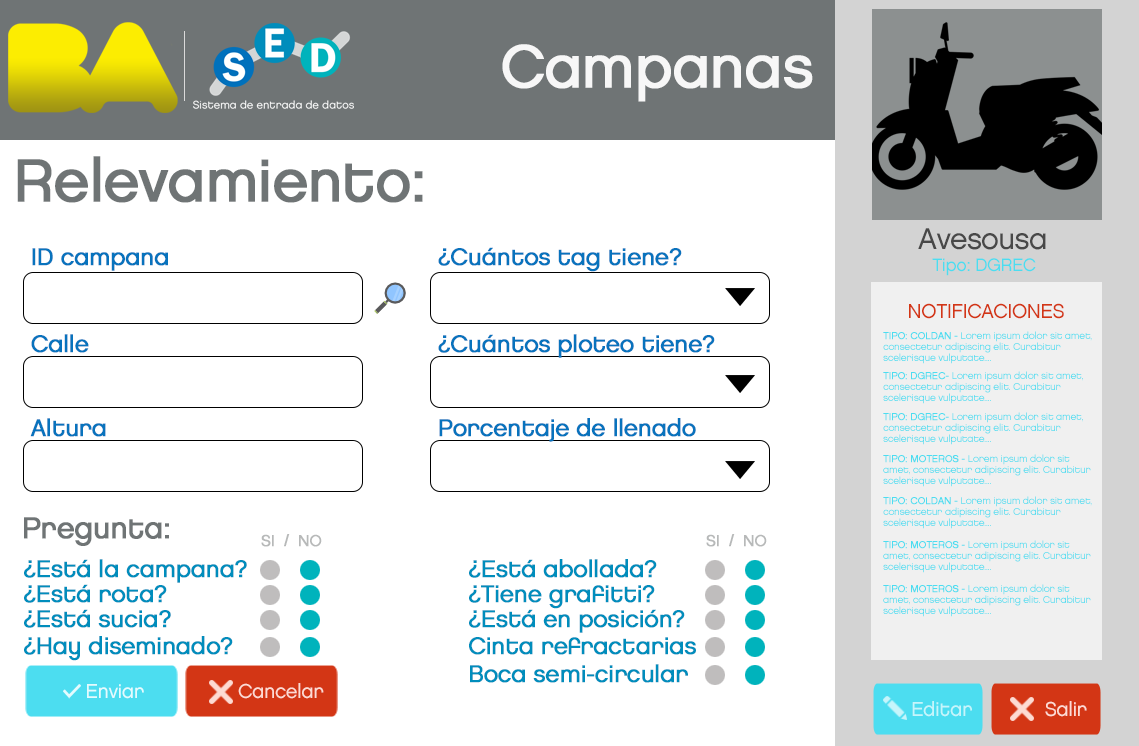
<style>
.page{position:relative;width:1139px;height:746px;background:#ffffff}
.page>*{position:absolute;margin:0}
.t1{font:60px "Chalet-LondonNineteenEighty";letter-spacing:-0.025em;color:#f7f7f7;font-weight:bold}
.t2{font:60px "Chalet-LondonNineteenEighty";letter-spacing:-0.025em;color:#6f7475;font-weight:bold}
.t3{font:30px "Chalet-LondonNineteenEighty";letter-spacing:-0.025em;color:#484848}
.t4{font:24px "Chalet-LondonNineteenEighty";letter-spacing:-0.025em;color:#0873bd;font-weight:bold}
.t5{font:18px "Chalet-LondonNineteenEighty";letter-spacing:-0.025em;color:#4cddf0}
.t6{font:20px "Chalet-LondonNineteenEighty";letter-spacing:-0.025em;color:#d33615}
.t7{font:10px/11px "Chalet-LondonNineteenEighty";letter-spacing:-0.025em;color:#4cddf0}
.t8{font:10px/11px "Chalet-LondonNineteenEighty";letter-spacing:-0.025em;color:#4cddf0;font-weight:bold}
.t9{font:30px "Chalet-LondonNineteenEighty";letter-spacing:-0.025em;color:#6f7475;font-weight:bold}
.t10{font:16px "Chalet-LondonNineteenEighty";letter-spacing:-0.025em;color:#b7b9b9;font-weight:bold}
.t11{font:24px "Chalet-LondonNineteenEighty";letter-spacing:-0.025em;color:#008dbc;font-weight:bold}
.t12{font:20px "Chalet-LondonNineteenEighty";letter-spacing:-0.025em;color:#e4fbfe}
.t13{font:20px "Chalet-LondonNineteenEighty";letter-spacing:-0.025em;color:#fddbd3}
.t14{font:20px "Chalet-LondonNineteenEighty";letter-spacing:-0.025em;color:#c6f5fb}
</style>
<div class="page">
<p class="t1" style="left:502px;top:44px;width:311px;height:58px">Campanas</p>
<p class="t2" style="left:17px;top:156px;width:406px;height:47px">Relevamiento:</p>
<p class="t3" style="left:918px;top:228px;width:128px;height:22px">Avesousa</p>
<p class="t4" style="left:32px;top:248px;width:136px;height:23px">ID campana</p>
<p class="t4" style="left:438px;top:247px;width:244px;height:25px">¿Cuántos tag tiene?</p>
<p class="t5" style="left:932px;top:258px;width:104px;height:18px">Tipo: DGREC</p>
<p class="t6" style="left:909px;top:303px;width:155px;height:16px">NOTIFICACIONES</p>
<p class="t4" style="left:31px;top:334px;width:58px;height:19px">Calle</p>
<p class="t4" style="left:438px;top:334px;width:277px;height:24px">¿Cuántos ploteo tiene?</p>
<p class="t7" style="left:883px;top:331px;width:209px;height:33px"><span class="t8">TIPO: COLDAN - </span>Lorem ipsum dolor sit amet, consectetur adipiscing elit. Curabitur scelerisque vulputate....</p>
<p class="t7" style="left:883px;top:371px;width:200px;height:33px"><span class="t8">TIPO: DGREC- </span>Lorem ipsum dolor sit amet, consectetur adipiscing elit. Curabitur scelerisque vulputate....</p>
<p class="t7" style="left:883px;top:412px;width:200px;height:33px"><span class="t8">TIPO: DGREC- </span>Lorem ipsum dolor sit amet, consectetur adipiscing elit. Curabitur scelerisque vulputate....</p>
<p class="t4" style="left:30px;top:418px;width:76px;height:19px">Altura</p>
<p class="t4" style="left:439px;top:418px;width:257px;height:24px">Porcentaje de llenado</p>
<p class="t7" style="left:883px;top:454px;width:208px;height:33px"><span class="t8">TIPO: MOTEROS - </span>Lorem ipsum dolor sit amet, consectetur adipiscing elit. Curabitur scelerisque vulputate....</p>
<p class="t7" style="left:883px;top:496px;width:209px;height:33px"><span class="t8">TIPO: COLDAN - </span>Lorem ipsum dolor sit amet, consectetur adipiscing elit. Curabitur scelerisque vulputate....</p>
<p class="t9" style="left:24px;top:517px;width:145px;height:29px">Pregunta:</p>
<p class="t10" style="left:261px;top:534px;width:61px;height:13px">SI  /  NO</p>
<p class="t10" style="left:706px;top:534px;width:61px;height:13px">SI  /  NO</p>
<p class="t7" style="left:883px;top:540px;width:208px;height:33px"><span class="t8">TIPO: MOTEROS - </span>Lorem ipsum dolor sit amet, consectetur adipiscing elit. Curabitur scelerisque vulputate....</p>
<p class="t11" style="left:24px;top:559px;width:223px;height:24px">¿Está la campana?</p>
<p class="t11" style="left:469px;top:559px;width:188px;height:19px">¿Está abollada?</p>
<p class="t11" style="left:24px;top:584px;width:143px;height:19px">¿Está rota?</p>
<p class="t11" style="left:469px;top:585px;width:186px;height:24px">¿Tiene grafitti?</p>
<p class="t7" style="left:883px;top:584px;width:208px;height:33px"><span class="t8">TIPO: MOTEROS - </span>Lorem ipsum dolor sit amet, consectetur adipiscing elit. Curabitur scelerisque vulputate....</p>
<p class="t11" style="left:24px;top:609px;width:147px;height:19px">¿Está sucia?</p>
<p class="t11" style="left:469px;top:609px;width:216px;height:24px">¿Está en posición?</p>
<p class="t11" style="left:24px;top:636px;width:209px;height:25px">¿Hay diseminado?</p>
<p class="t11" style="left:469px;top:637px;width:227px;height:18px">Cinta refractarias</p>
<p class="t11" style="left:470px;top:664px;width:218px;height:19px">Boca semi-circular</p>
<p class="t12" style="left:87px;top:684px;width:57px;height:15px">Enviar</p>
<p class="t13" style="left:238px;top:683px;width:86px;height:16px">Cancelar</p>
<p class="t14" style="left:912px;top:701px;width:60px;height:16px">Editar</p>
<p class="t13" style="left:1045px;top:701px;width:42px;height:16px">Salir</p>
</div>
